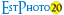
<style>
.page{position:relative;width:64px;height:15px;background:#ffffff}
.page>*{position:absolute;margin:0}
.t1{font:12.3px "TrajanPro-Regular";color:#027ac6}
.t2{font:8.2px "TrajanPro-Regular";color:#027ac6}
.t3{font:16.4px "TrajanPro-Regular";color:#027ac6}
</style>
<div class="page">
<p class="t1" style="left:1px;top:1px;width:8px;height:13px">E</p>
<p class="t2" style="left:8px;top:5px;width:11px;height:6px">st</p>
<p class="t3" style="left:18px;top:1px;width:8px;height:13px">P</p>
<p class="t2" style="left:26px;top:5px;width:24px;height:6px">hoto</p>
</div>
